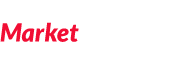
<style>
.page{position:relative;width:178px;height:62px;background:#ffffff}
.page>*{position:absolute;margin:0}
.t1{font:25px "Lato-BlackItalic";color:#f10e34}
.t2{font:25px "Lato-BlackItalic";color:#ffffff}
</style>
<div class="page">
<p class="t1" style="left:0px;top:22px;width:152px;height:24px">Market<span class="t2">Supply</span></p>
</div>
